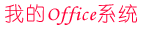
<style>
.page{position:relative;width:143px;height:29px;background:#ffffff}
.page>*{position:absolute;margin:0}
.t1{font:20px "MonotypeCorsiva";letter-spacing:0.06em;color:#ff0036}
.t2{font:20px "YouYuan";letter-spacing:0.06em;color:#ff0036}
</style>
<div class="page">
<p class="t1" style="left:5px;top:4px;width:132px;height:21px"><span class="t2">我的</span>Office<span class="t2">系统</span></p>
</div>
